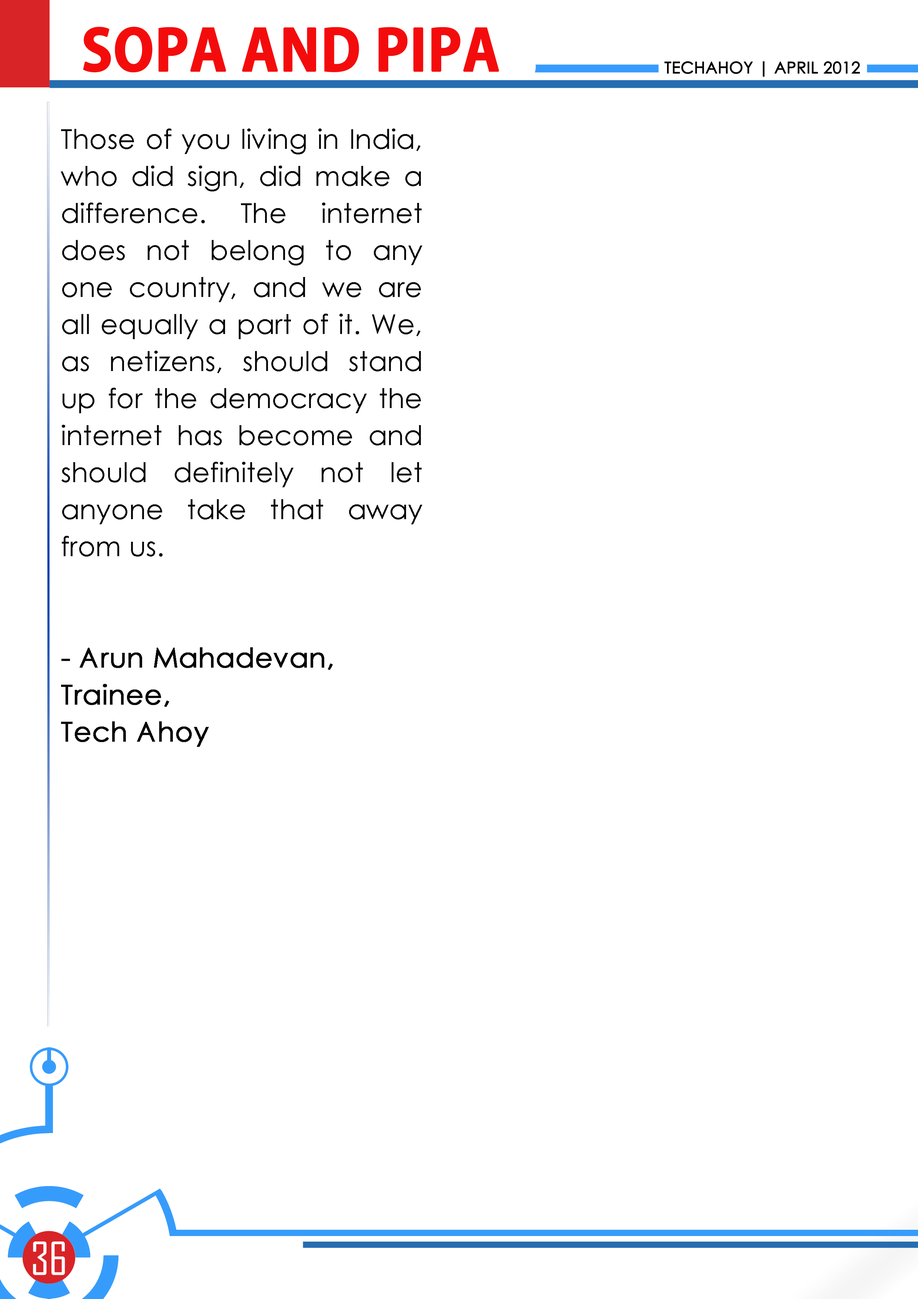
<style>
.page{position:relative;width:918px;height:1299px;background:#ffffff}
.page>*{position:absolute;margin:0}
.t1{font:55.5px "AdobeGothicStd-Bold";color:#f40c0c;text-transform:uppercase;font-weight:bold}
.t2{font:16px "CenturyGothic";color:#000000;text-transform:uppercase;font-weight:bold}
.t3{font:27.5px/37px "CenturyGothic";color:#080808}
.t4{font:27.5px/37px "CenturyGothic";color:#080808;font-weight:bold}
.t5{font:43.7px "AgencyFB-Reg";color:#ffffff;text-transform:uppercase}
</style>
<div class="page">
<p class="t1" style="left:83px;top:27px;width:416px;height:46px">sopa and pipa</p>
<p class="t2" style="left:665px;top:61px;width:195px;height:16px">techahoy | APRIL 2012</p>
<p class="t3" style="left:61px;top:128px;width:361px;height:619px;text-align:justify">Those of you living in India, who did sign, did make a difference. The internet does not belong to any one country, and we are all equally a part of it. We, as netizens, should stand up for the democracy the internet has become and should definitely not let anyone take that away from us.<br><br><br><span class="t4">- Arun Mahadevan,<br>Trainee,<br>Tech Ahoy</span></p>
<p class="t5" style="left:33px;top:1241px;width:32px;height:34px">36</p>
</div>
